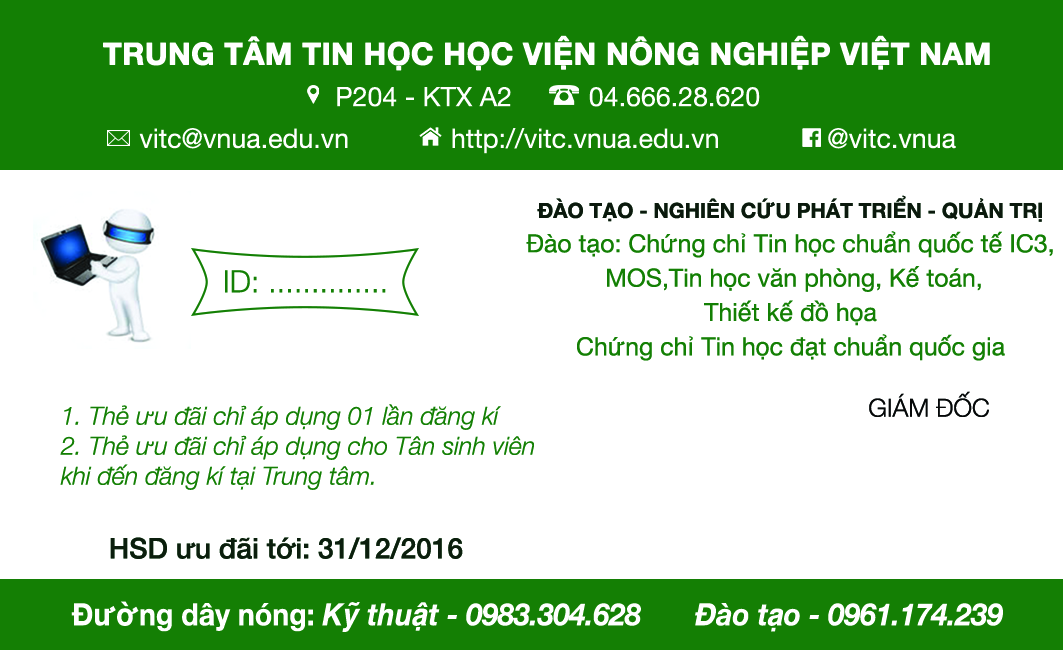
<style>
.page{position:relative;width:1063px;height:650px;background:#ffffff}
.page>*{position:absolute;margin:0}
.t1{font:26.9px/41.7px "HelveticaNeue";color:#ffffff}
.t2{font:30.2px/41.7px "HelveticaNeue-Bold";color:#ffffff;font-weight:bold}
.t3{font:24.9px/34.3px "HelveticaNeue";color:#137f04}
.t4{font:24.9px "HelveticaNeue";color:#137f04}
.t5{font:20.8px/34.3px "HelveticaNeue-Bold";color:#0b180d}
.t6{font:30.6px "HelveticaNeue-Light";color:#137f04}
.t7{font:24.8px "HelveticaNeue-Light";color:#060808}
.t8{font:25px "HelveticaNeue-LightItalic";color:#137f04}
.t9{font:28.5px "HelveticaNeue-Medium";color:#0c1e0d}
.t10{font:30.6px "HelveticaNeue-BoldItalic";color:#ffffff;scale:0.93 1}
.t11{font:30.6px "HelveticaNeue-Bold";color:#ffffff;scale:0.93 1}
</style>
<div class="page">
<p class="t1" style="left:103px;top:35px;width:887px;height:119px;text-align:center"><span class="t2">TRUNG TÂM TIN HỌC HỌC VIỆN NÔNG NGHIỆP VIỆT NAM<br></span>P204 - KTX A2          04.666.28.620<br>vitc@vnua.edu.vn         http://vitc.vnua.edu.vn         @vitc.vnua</p>
<p class="t3" style="left:526px;top:195px;width:527px;height:166px;text-align:center"><span class="t4"><br><br></span><span class="t5">ĐÀO TẠO - NGHIÊN CỨU PHÁT TRIỂN - QUẢN TRỊ<br></span>Đào tạo: Chứng chỉ Tin học chuẩn quốc tế IC3,<br> MOS,Tin học văn phòng, Kế toán,<br>Thiết kế đồ họa<br>Chứng chỉ Tin học đạt chuẩn quốc gia</p>
<p class="t6" style="left:225px;top:270px;width:161px;height:23px">ID: ..............</p>
<p class="t7" style="left:869px;top:391px;width:120px;height:26px">GIÁM ĐỐC</p>
<p class="t8" style="left:60px;top:404px;width:474px;height:86px">1. Thẻ ưu đãi chỉ áp dụng 01 lần đăng kí<br>2. Thẻ ưu đãi chỉ áp dụng cho Tân sinh viên <br>khi đến đăng kí tại Trung tâm.</p>
<p class="t9" style="left:110px;top:537px;width:353px;height:22px">HSD ưu đãi tới: 31/12/2016</p>
<p class="t10" style="left:71px;top:601px;width:932px;height:31px"><span class="t11">Đường dây nóng: </span>Kỹ thuật - 0983.304.628  Đào tạo - 0961.174.239</p>
</div>
